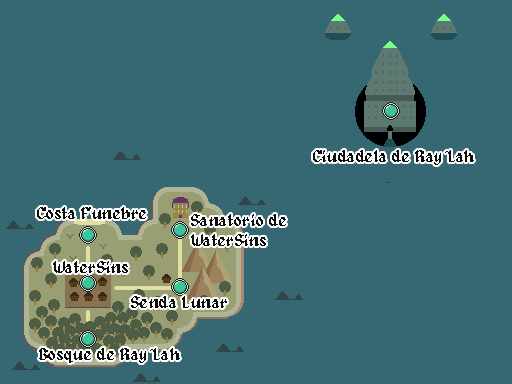
<style>
.page{position:relative;width:512px;height:384px;background:#356873}
.page>*{position:absolute;margin:0}
.t1{font:16.7px "Alagard";color:#0d0d0d}
.t2{font:16.7px "MyriadPro-Regular";color:#0d0d0d}
</style>
<div class="page">
<p class="t1" style="left:313px;top:150px;width:161px;height:15px">Ciudadela de Ray<span class="t2">´</span>Lah</p>
<p class="t1" style="left:37px;top:207px;width:109px;height:12px">Costa Funebre</p>
<p class="t1" style="left:191px;top:214px;width:95px;height:32px">Sanatorio de<br>WaterSins</p>
<p class="t1" style="left:53px;top:261px;width:75px;height:12px">WaterSins</p>
<p class="t1" style="left:131px;top:296px;width:96px;height:12px">Senda Lunar</p>
<p class="t1" style="left:39px;top:348px;width:141px;height:15px">Bosque de Ray<span class="t2">´</span>Lah</p>
</div>
